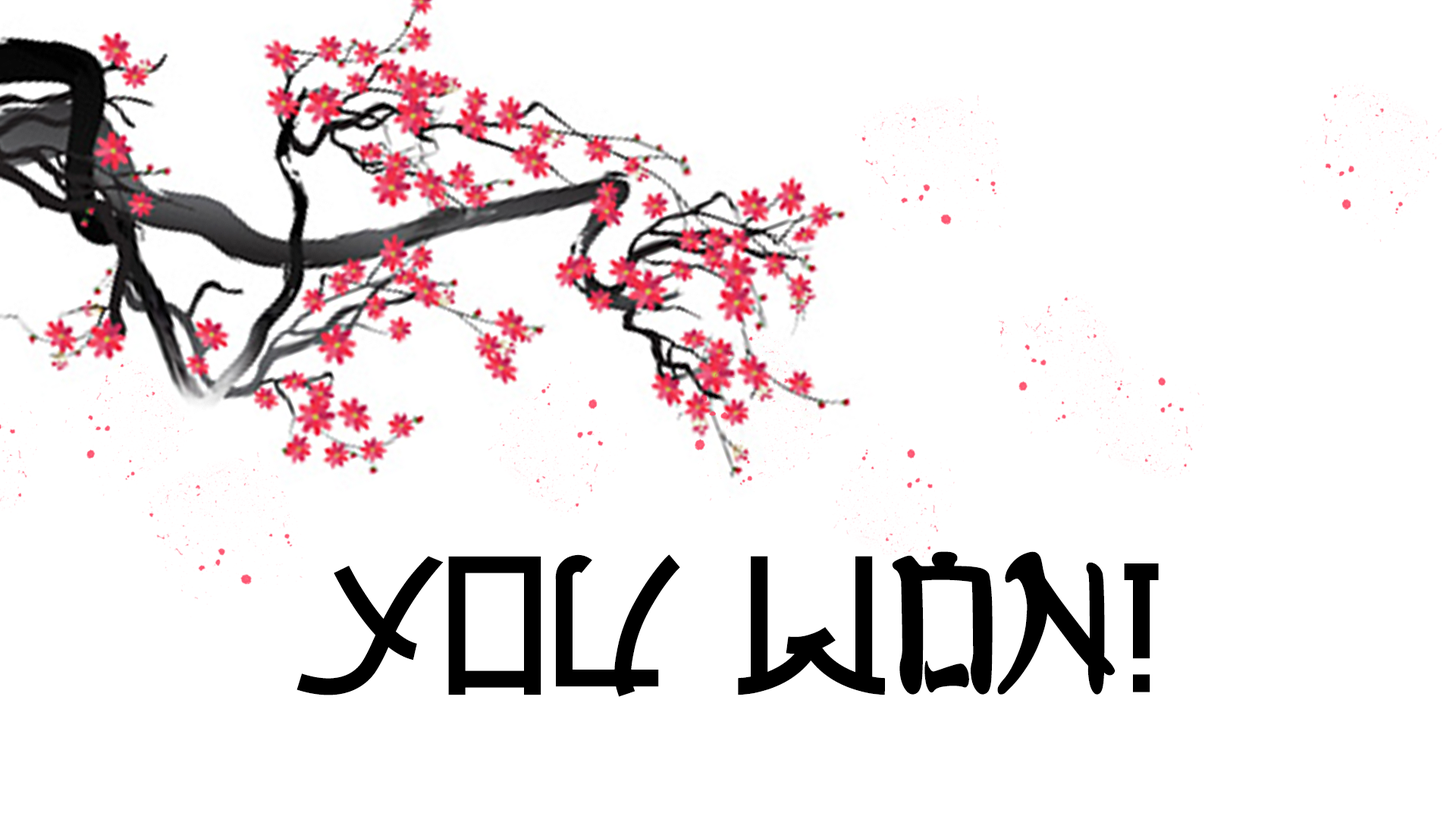
<style>
.page{position:relative;width:1456px;height:819px;background:#ffffff}
.page>*{position:absolute;margin:0}
.t1{font:197.5px "KongJapanese";letter-spacing:-0.001em;color:#000000}
</style>
<div class="page">
<p class="t1" style="left:297px;top:551px;width:862px;height:146px">YOU Won!</p>
</div>
